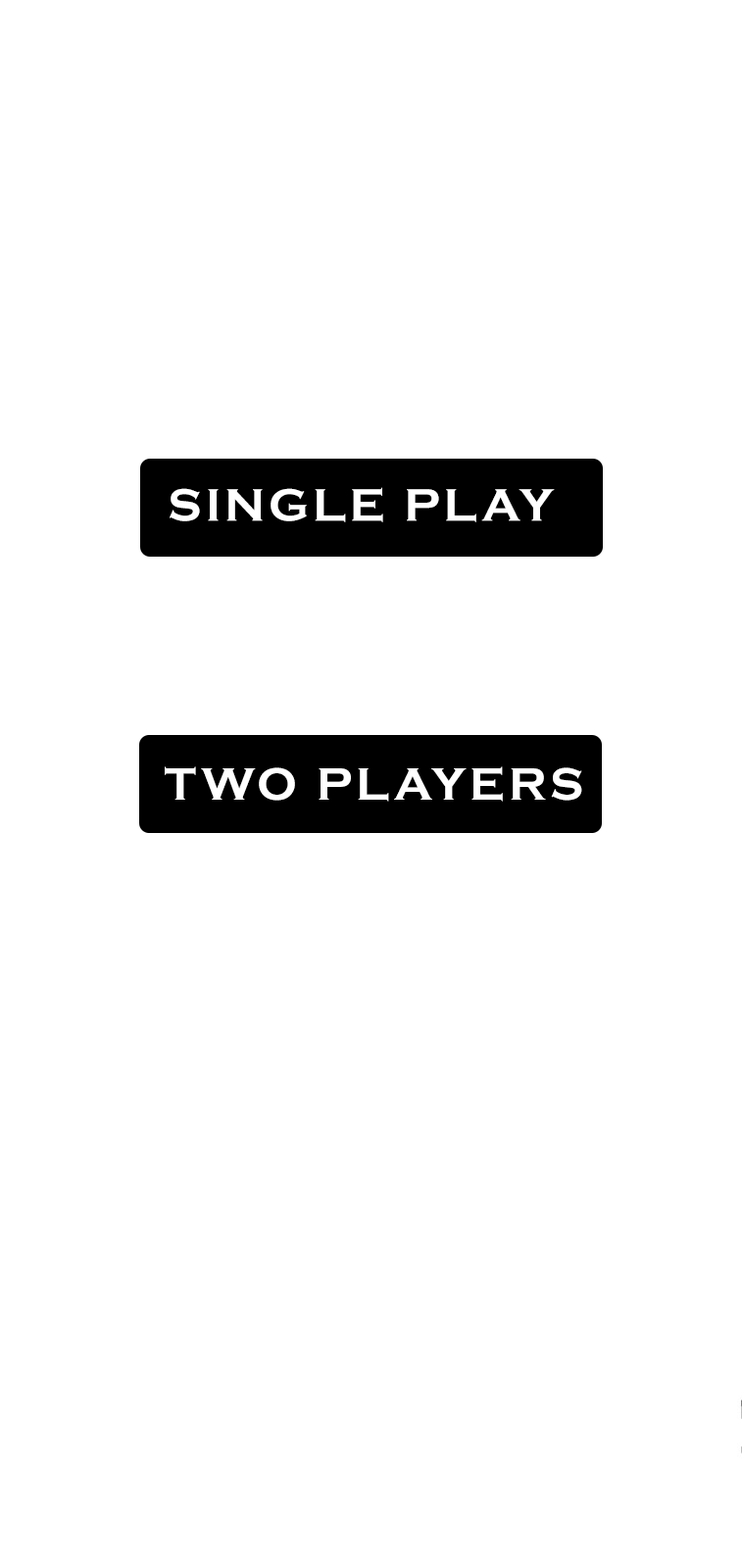
<style>
.page{position:relative;width:742px;height:1568px;background:#ffffff}
.page>*{position:absolute;margin:0}
.t1{font:47px "CopperplateGothic-Bold";letter-spacing:0.075em;color:#ffffff;text-transform:uppercase}
</style>
<div class="page">
<p class="t1" style="left:170px;top:487px;width:385px;height:35px">sINGLE PLAY</p>
<p class="t1" style="left:165px;top:766px;width:417px;height:36px">TWO PLAYERS</p>
</div>
